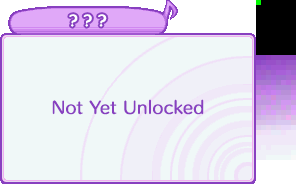
<style>
.page{position:relative;width:296px;height:192px;background:#f0f8f8}
.page>*{position:absolute;margin:0}
.t1{font:14px "HummingStd-B";letter-spacing:0.02em;color:#ffffff}
.t2{font:16px "HummingStd-D";letter-spacing:0.02em;color:#8840c0}
</style>
<div class="page">
<p class="t1" style="left:69px;top:14px;width:38px;height:13px">? ? ?</p>
<p class="t2" style="left:52px;top:99px;width:152px;height:16px">Not Yet Unlocked</p>
</div>
